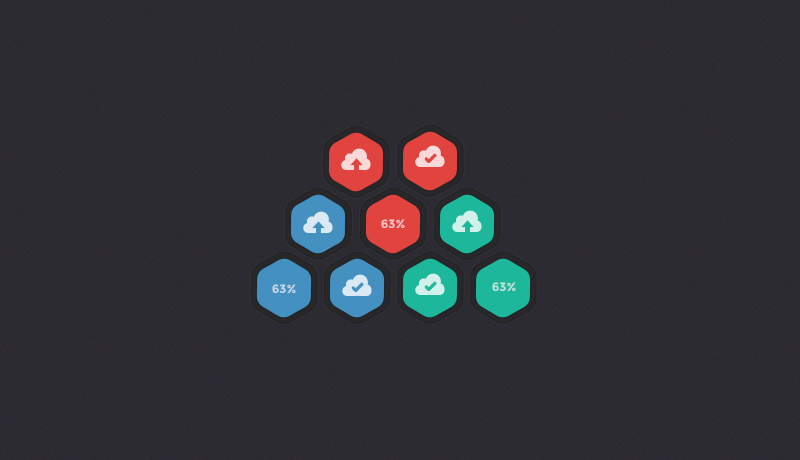
<style>
.page{position:relative;width:800px;height:460px}
.page>*{position:absolute;margin:0}
.t1{font:12px "Montserrat-Bold";color:#f3c3c1}
.t2{font:12px "Montserrat-Bold";color:#c3d7e7}
.t3{font:12px "Montserrat-Bold";color:#bbe4da}
</style>
<div class="page">
<p class="t1" style="left:381px;top:219px;width:24px;height:9px">63%</p>
<p class="t2" style="left:272px;top:284px;width:24px;height:9px">63%</p>
<p class="t3" style="left:492px;top:282px;width:24px;height:9px">63%</p>
</div>
